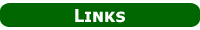
<style>
.page{position:relative;width:200px;height:30px;background:#006600}
.page>*{position:absolute;margin:0}
.t1{font:17.9px "TahomaSmallCap-Bold";color:#ffffff}
</style>
<div class="page">
<p class="t1" style="left:75px;top:9px;width:50px;height:14px">Links</p>
</div>
